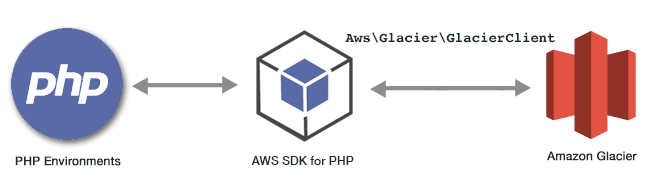
<style>
.page{position:relative;width:650px;height:190px;background:#ffffff}
.page>*{position:absolute;margin:0}
.t1{font:14px "Courier-Bold";color:#1d2a2e}
.t2{font:12px "HelveticaNeue";color:#1d2a2e;font-weight:bold}
.t3{font:12.1px "HelveticaNeue-Medium";color:#1d2a2e}
</style>
<div class="page">
<p class="t1" style="left:345px;top:32px;width:210px;height:11px">Aws\Glacier\GlacierClient</p>
<p class="t2" style="left:15px;top:156px;width:106px;height:10px">PHP Environments</p>
<p class="t3" style="left:251px;top:156px;width:103px;height:9px">AWS SDK for PHP</p>
<p class="t2" style="left:547px;top:151px;width:90px;height:10px">Amazon Glacier</p>
</div>
